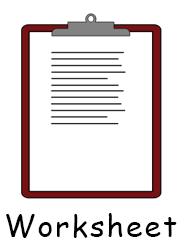
<style>
.page{position:relative;width:180px;height:250px;background:#ffffff}
.page>*{position:absolute;margin:0}
.t1{font:30px "ComicSansMS";letter-spacing:0.07em;color:#000000}
</style>
<div class="page">
<p class="t1" style="left:6px;top:213px;width:171px;height:25px">Worksheet</p>
</div>
